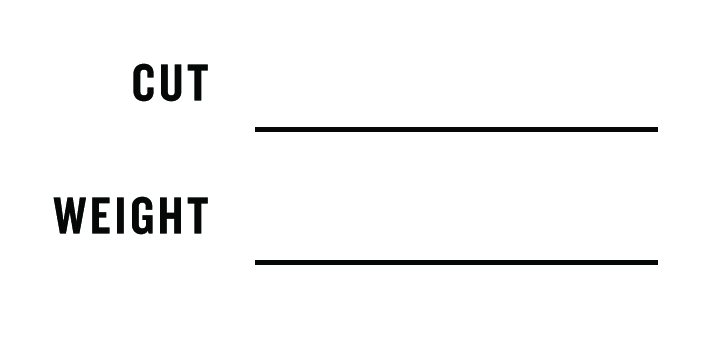
<style>
.page{position:relative;width:728px;height:341px;background:#ffffff}
.page>*{position:absolute;margin:0}
.t1{font:54.2px "Knockout-HTF49-Liteweight";letter-spacing:0.07em;color:#060808}
</style>
<div class="page">
<p class="t1" style="left:133px;top:63px;width:75px;height:39px">CUT</p>
<p class="t1" style="left:53px;top:196px;width:155px;height:39px">WEIGHT</p>
</div>
